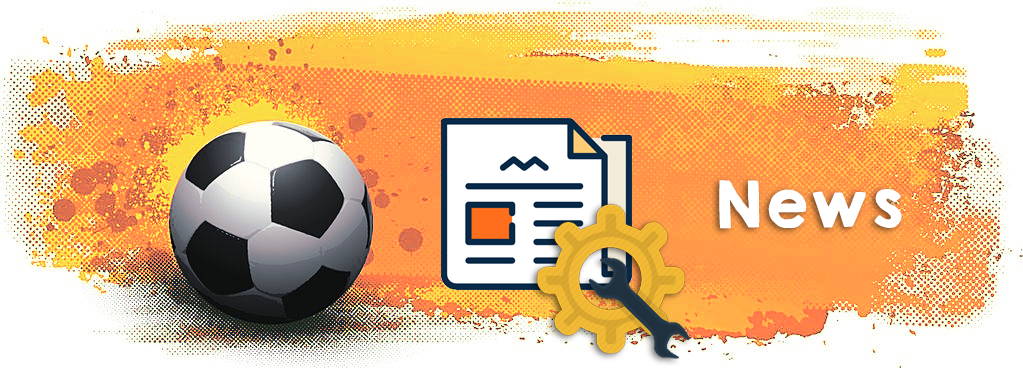
<style>
.page{position:relative;width:1023px;height:368px}
.page>*{position:absolute;margin:0}
.t1{font:58.3px "KGHAPPYSolid";color:#ffffff}
.t2{font:50px "KGHAPPYSolid";color:#ffffff}
</style>
<div class="page">
<p class="t1" style="left:719px;top:180px;width:183px;height:49px"><span class="t2"> </span>News</p>
</div>
